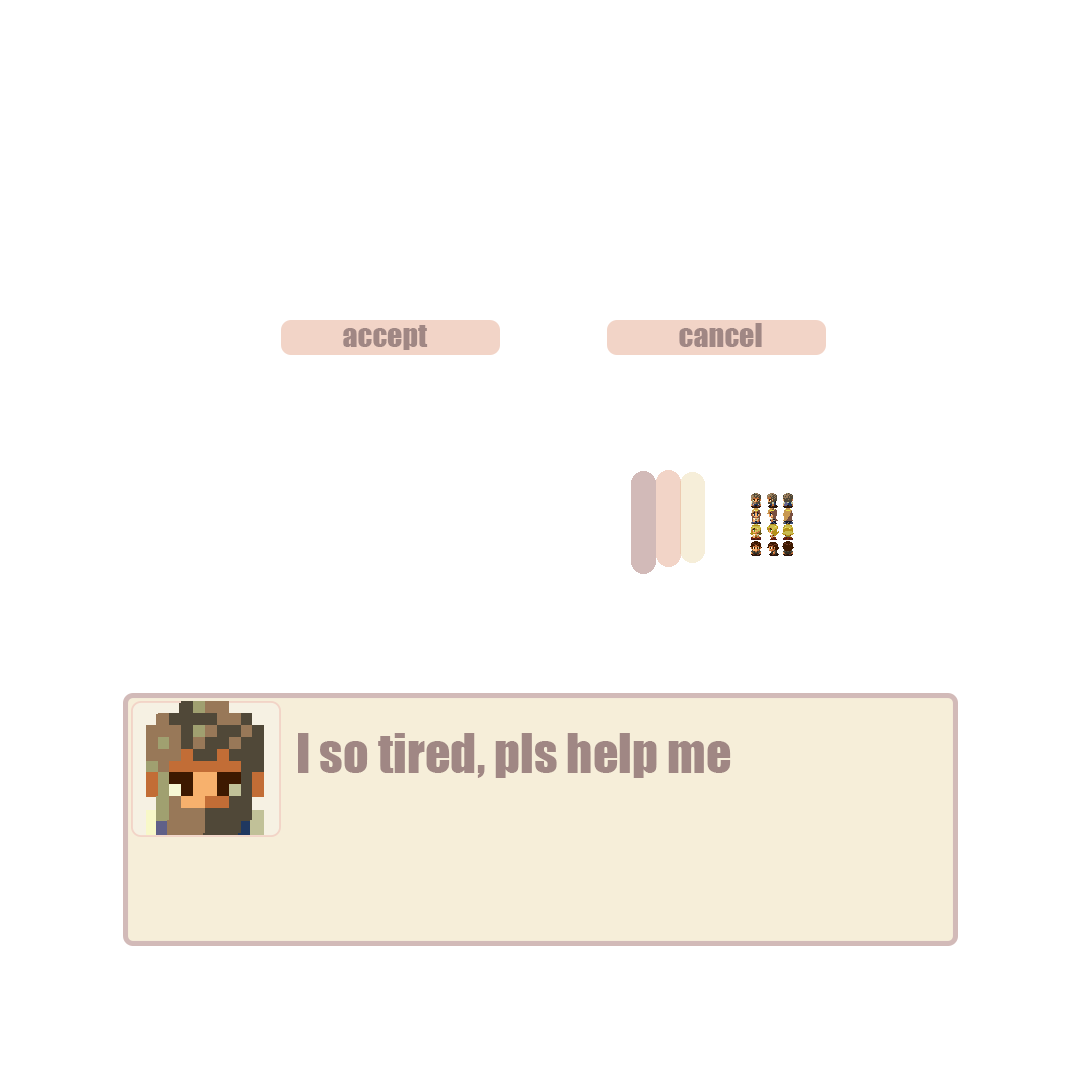
<style>
.page{position:relative;width:1080px;height:1080px;background:#ffffff}
.page>*{position:absolute;margin:0}
.t1{font:30px "Impact";color:#a08784}
.t2{font:50.3px "Impact";color:#a08784}
</style>
<div class="page">
<p class="t1" style="left:343px;top:325px;width:85px;height:25px">accept</p>
<p class="t1" style="left:679px;top:323px;width:83px;height:24px">cancel</p>
<p class="t2" style="left:298px;top:733px;width:433px;height:45px">I so tired, pls help me</p>
</div>
